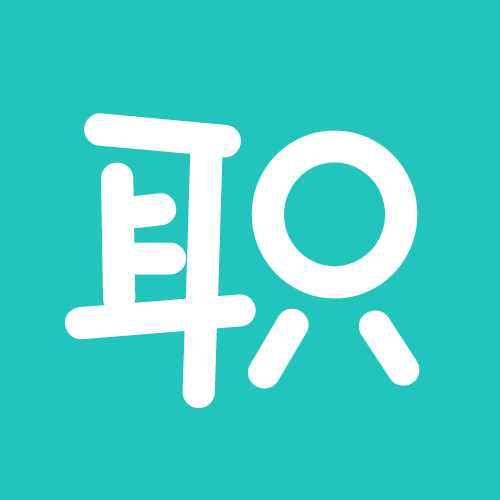
<style>
.page{position:relative;width:500px;height:500px;background:#22c5bc}
.page>*{position:absolute;margin:0}
.t1{font:400px "HYLeMiaoTiW";color:#ffffff;font-weight:bold}
</style>
<div class="page">
<p class="t1" style="left:65px;top:113px;width:355px;height:295px">职</p>
</div>
